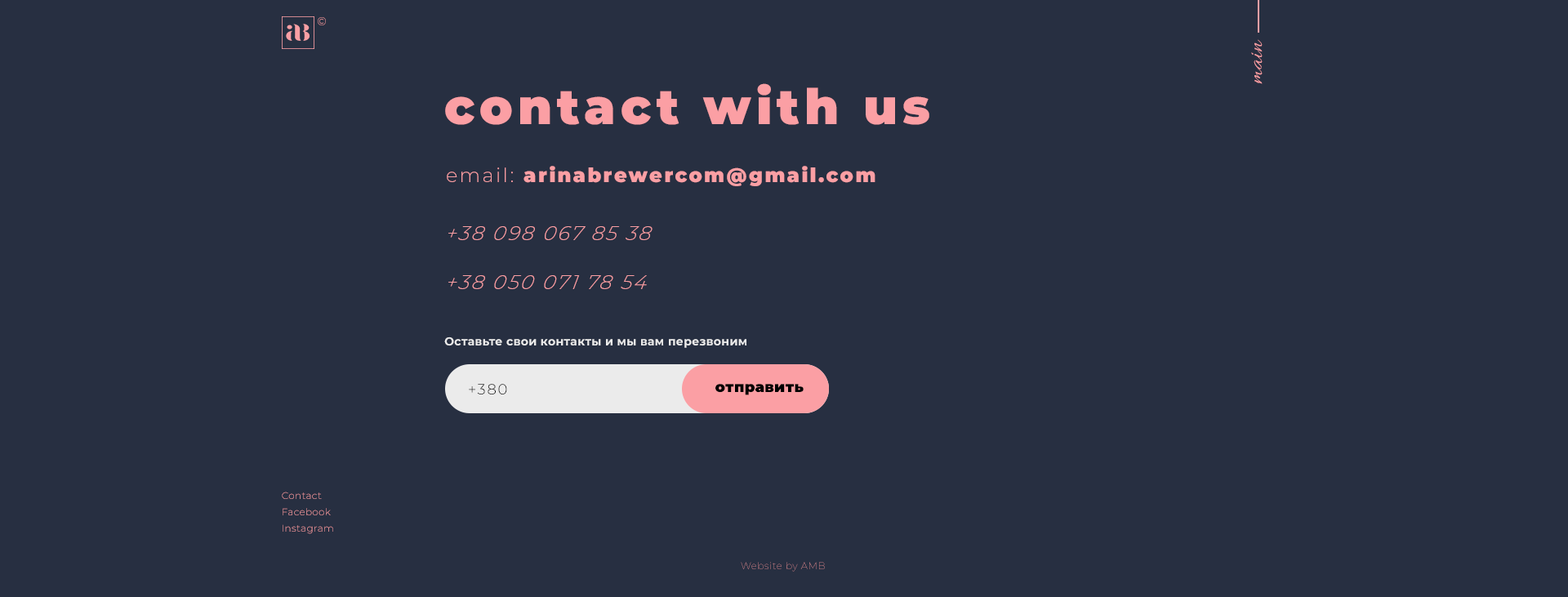
<style>
.page{position:relative;width:1568px;height:597px;background:#272f41}
.page>*{position:absolute;margin:0}
.t1{font:11.4px "Montserrat-Light";letter-spacing:0.025em}
.t2{font:24.5px "Allura-Regular";letter-spacing:0.025em;color:#fb9fa4}
.t3{font:49px "Montserrat-Black";letter-spacing:0.1em;color:#fb9fa4}
.t4{font:19.6px "Montserrat-Black";letter-spacing:0.1em;color:#fb9fa4}
.t5{font:19.6px "Montserrat-Light";letter-spacing:0.1em;color:#fb9fa4}
.t6{font:19.6px/49px "Montserrat-LightItalic";letter-spacing:0.1em;color:#fb9fa4;font-style:italic}
.t7{font:11.4px "Montserrat-Bold";letter-spacing:0.025em;color:#ebebeb}
.t8{font:14.7px "Montserrat-Light";letter-spacing:0.1em;color:#000000}
.t9{font:14.7px "Montserrat-Black";letter-spacing:0.025em;color:#000000}
.t10{font:9.8px/16.3px "Montserrat-Light";letter-spacing:0.025em}
.t11{font:9.6px "Montserrat-Thin";letter-spacing:0.05em}
</style>
<div class="page">
<p class="t1" style="left:318px;top:17px;width:8px;height:8px">©</p>
<p class="t2" style="left:1251px;top:39px;width:12px;height:45px;rotate:-90deg">main</p>
<p class="t3" style="left:445px;top:83px;width:484px;height:42px">contact with us</p>
<p class="t4" style="left:447px;top:166px;width:428px;height:20px"><span class="t5">email:</span> arinabrewercom@gmail.com</p>
<p class="t6" style="left:448px;top:226px;width:205px;height:63px">+38 098 067 85 38<br>+38 050 071 78 54</p>
<p class="t7" style="left:444px;top:336px;width:303px;height:12px">Оставьте свои контакты и мы вам перезвоним</p>
<p class="t8" style="left:469px;top:384px;width:38px;height:10px">+380</p>
<p class="t9" style="left:715px;top:384px;width:89px;height:11px">отправить</p>
<p class="t10" style="left:282px;top:492px;width:51px;height:42px">Contact<br>Facebook<br>Instagram</p>
<p class="t11" style="left:741px;top:562px;width:84px;height:10px">Website by AMB</p>
</div>
